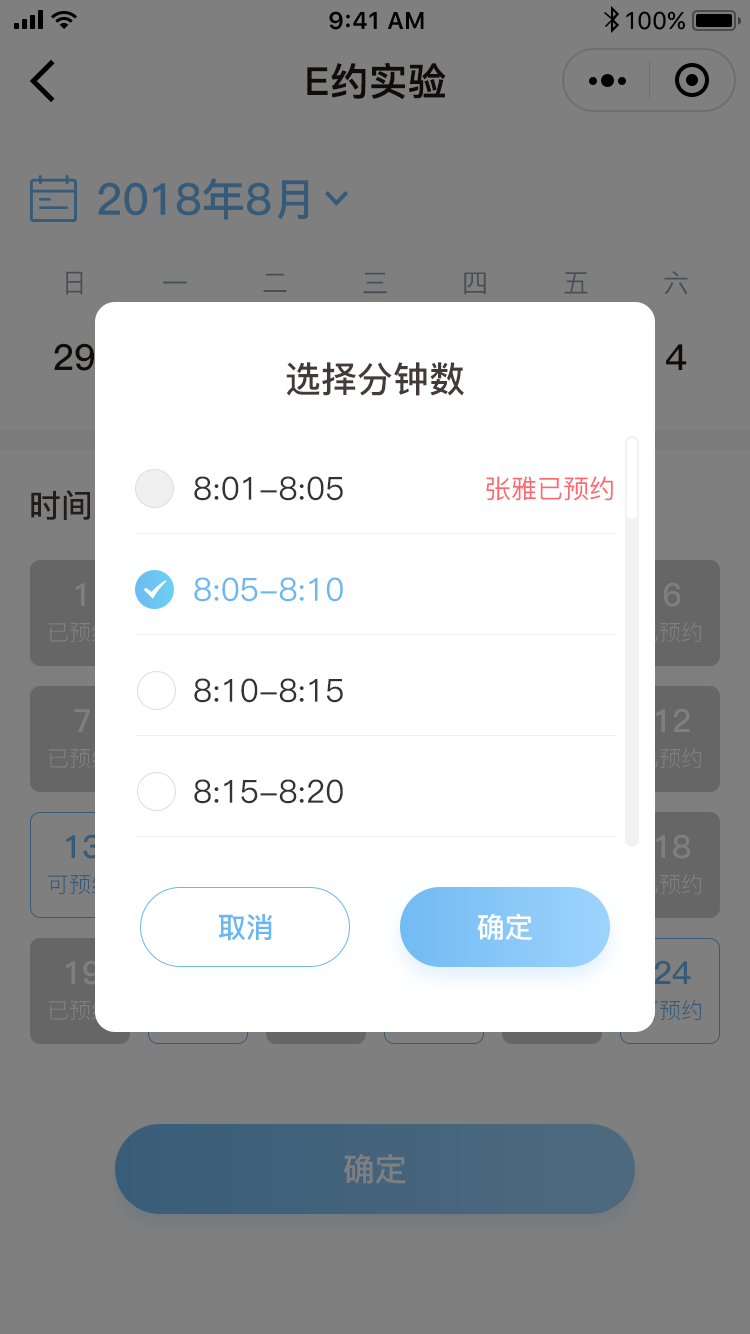
<style>
.page{position:relative;width:750px;height:1334px;background:#7f7f7f}
.page>*{position:absolute;margin:0}
.t1{font:38px "PingFang-SC-Bold";color:#231815;font-weight:bold}
.t2{font:44px "PingFang-SC-Bold";color:#365b78}
.t3{font:26px "PingFang-SC-Medium";color:#484e57}
.t4{font:36px "PingFang-SC-Bold";color:#231815}
.t5{font:36px "PingFang-SC-Bold";color:#433b39}
.t6{font:32px "PingFang-SC-Medium";color:#333333}
.t7{font:26px "PingFang-SC-Medium";color:#ff686f}
.t8{font:28px "PingFang-SC-Regular"}
.t9{font:32px "PingFang-SC-Bold"}
.t10{font:32px "PingFang-SC-Medium";color:#6cb7f1}
.t11{font:32px "PingFang-SC-Bold";color:#7f7f7f}
.t12{font:28.4px "PingFang-SC-Bold";color:#6cb7f1}
.t13{font:28.4px "PingFang-SC-Bold";color:#ffffff}
.t14{font:32px "PingFang-SC-Bold";color:#365b78}
</style>
<div class="page">
<p class="t1" style="left:307px;top:62px;width:139px;height:38px">E约实验</p>
<p class="t2" style="left:98px;top:178px;width:211px;height:42px">2018年8月</p>
<p class="t3" style="left:66px;top:271px;width:17px;height:24px">日</p>
<p class="t3" style="left:163px;top:281px;width:24px;height:3px">一</p>
<p class="t3" style="left:263px;top:273px;width:24px;height:19px">二</p>
<p class="t3" style="left:363px;top:272px;width:24px;height:22px">三</p>
<p class="t3" style="left:464px;top:272px;width:22px;height:23px">四</p>
<p class="t3" style="left:564px;top:272px;width:24px;height:22px">五</p>
<p class="t3" style="left:664px;top:271px;width:24px;height:24px">六</p>
<p class="t4" style="left:54px;top:343px;width:40px;height:28px">29</p>
<p class="t4" style="left:666px;top:344px;width:21px;height:26px">4</p>
<p class="t5" style="left:286px;top:362px;width:178px;height:34px">选择分钟数</p>
<p class="t6" style="left:194px;top:476px;width:149px;height:25px">8:01-8:05</p>
<p class="t7" style="left:486px;top:476px;width:127px;height:25px">张雅已预约</p>
<p class="t8" style="left:31px;top:490px;width:210px;height:30px"><span class="t9">时间</span>（单位：时）</p>
<p class="t10" style="left:194px;top:577px;width:149px;height:25px">8:05-8:10</p>
<p class="t11" style="left:664px;top:582px;width:17px;height:25px">6</p>
<p class="t11" style="left:75px;top:583px;width:10px;height:23px">1</p>
<p class="t6" style="left:194px;top:678px;width:149px;height:25px">8:10-8:15</p>
<p class="t11" style="left:74px;top:709px;width:16px;height:23px">7</p>
<p class="t11" style="left:656px;top:708px;width:34px;height:24px">12</p>
<p class="t6" style="left:194px;top:779px;width:149px;height:25px">8:15-8:20</p>
<p class="t11" style="left:656px;top:834px;width:34px;height:25px">18</p>
<p class="t12" style="left:218px;top:914px;width:54px;height:27px">取消</p>
<p class="t13" style="left:477px;top:913px;width:55px;height:27px">确定</p>
<p class="t11" style="left:66px;top:960px;width:34px;height:25px">19</p>
<p class="t14" style="left:654px;top:960px;width:37px;height:24px">24</p>
<p class="t11" style="left:343px;top:1154px;width:63px;height:30px">确定</p>
</div>
